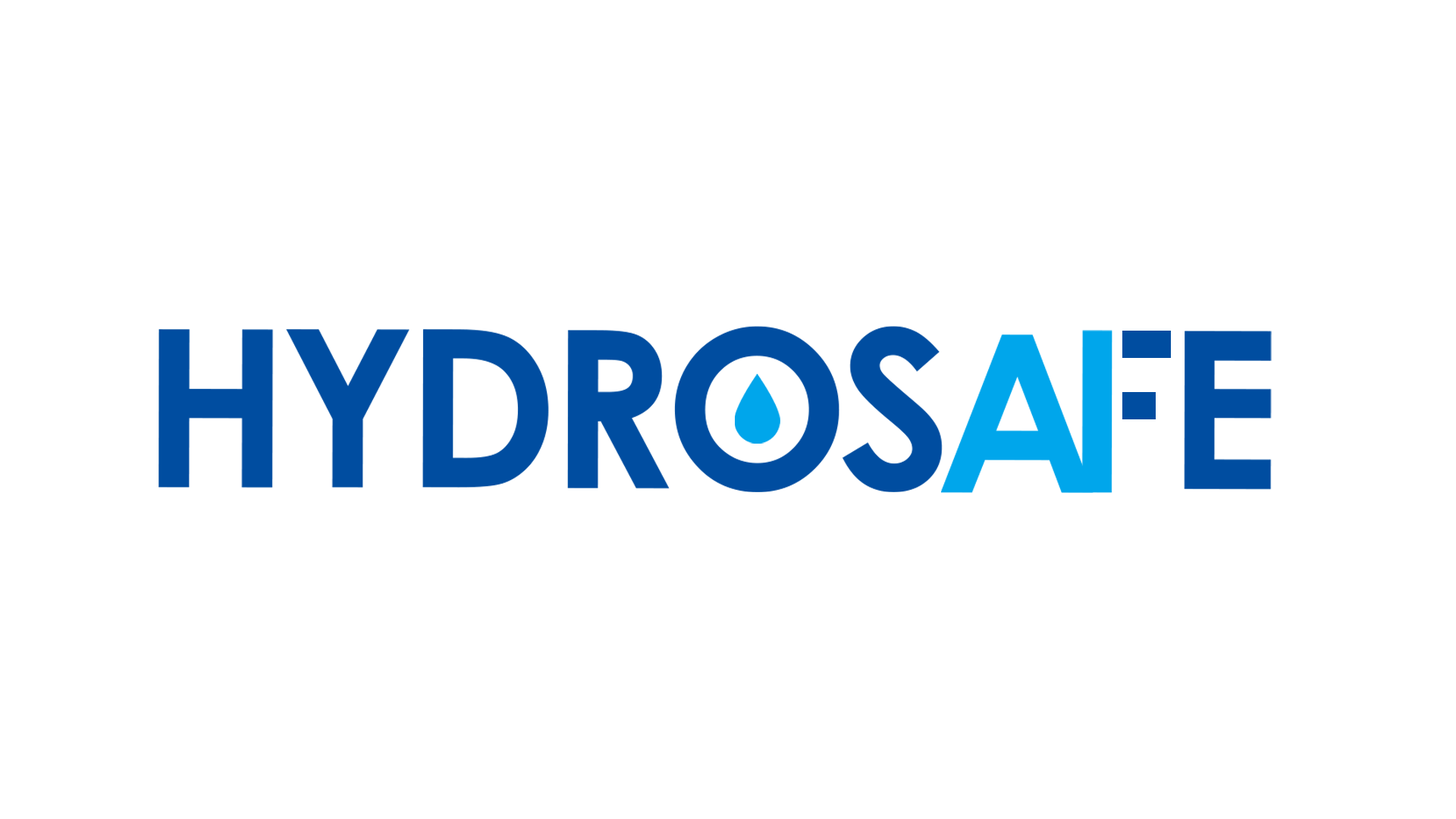
<style>
.page{position:relative;width:1456px;height:819px;background:#ffffff}
.page>*{position:absolute;margin:0}
.t1{font:219.8px "CenturyGothic-Bold";letter-spacing:-0.05em;color:#004da0;text-transform:uppercase}
.t2{font:219.8px "CenturyGothic-Bold";letter-spacing:-0.075em;color:#004da0;text-transform:uppercase}
.t3{font:219.8px "CenturyGothic-Bold";letter-spacing:-0.125em;color:#ffffff;text-transform:uppercase}
.t4{font:219.8px "CenturyGothic-Bold";letter-spacing:-0.05em;color:#ffffff;text-transform:uppercase}
.t5{font:219.8px "CenturyGothic-Bold";letter-spacing:-0.025em;color:#004da0;text-transform:uppercase}
.t6{font:219.8px "CenturyGothic-Bold";letter-spacing:-0.125em;color:#00a6eb;text-transform:uppercase}
.t7{font:219.8px "CenturyGothic-Bold";letter-spacing:-0.025em;color:#00a6eb}
</style>
<div class="page">
<p class="t1" style="left:158px;top:326px;width:1114px;height:166px">hydro<span class="t2">s</span><span class="t3">a</span><span class="t4">f</span><span class="t5">e</span></p>
<p class="t6" style="left:941px;top:330px;width:171px;height:163px">a<span class="t7">l</span></p>
</div>
